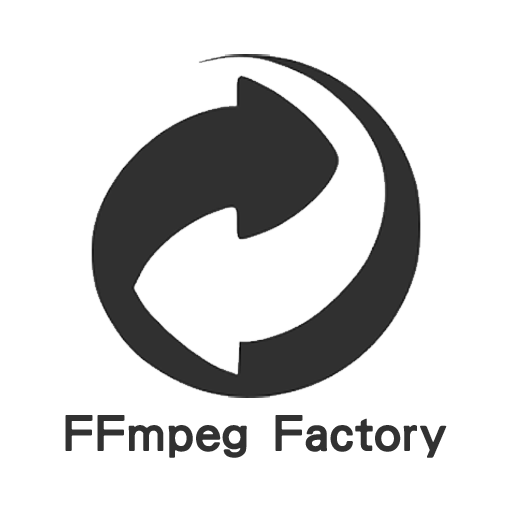
<style>
.page{position:relative;width:512px;height:512px;background:#ffffff}
.page>*{position:absolute;margin:0}
.t1{font:49.2px "HanWangHeiHeavy";color:#313131}
</style>
<div class="page">
<p class="t1" style="left:65px;top:415px;width:382px;height:43px">FFmpeg Factory</p>
</div>
